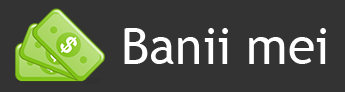
<style>
.page{position:relative;width:345px;height:92px;background:#333333}
.page>*{position:absolute;margin:0}
.t1{font:50px "TrebuchetMS";color:#ffffff}
</style>
<div class="page">
<p class="t1" style="left:124px;top:28px;width:202px;height:36px">Banii mei</p>
</div>
